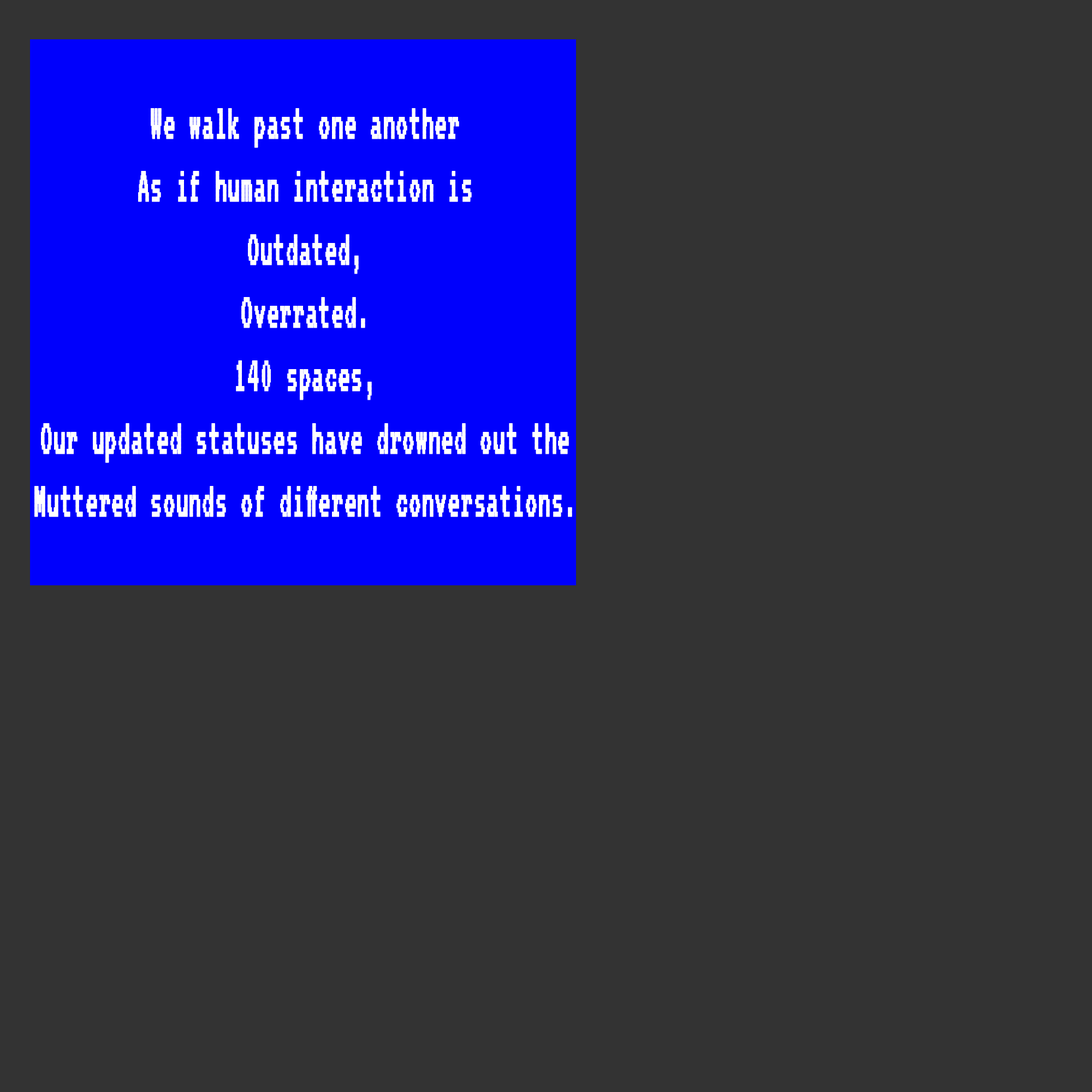
<style>
.page{position:relative;width:1092px;height:1092px;background:#333333}
.page>*{position:absolute;margin:0}
.t1{font:52.5px "VT323-Regular";color:#ffffff;font-weight:bold;scale:0.58 1}
</style>
<div class="page">
<p class="t1" style="left:34px;top:108px;width:538px;height:409px;text-align:center">We walk past one another<br>As if human interaction is<br>Outdated,<br>Overrated.<br>140 spaces,<br>Our updated statuses have drowned out the<br>Muttered sounds of different conversations.</p>
</div>
